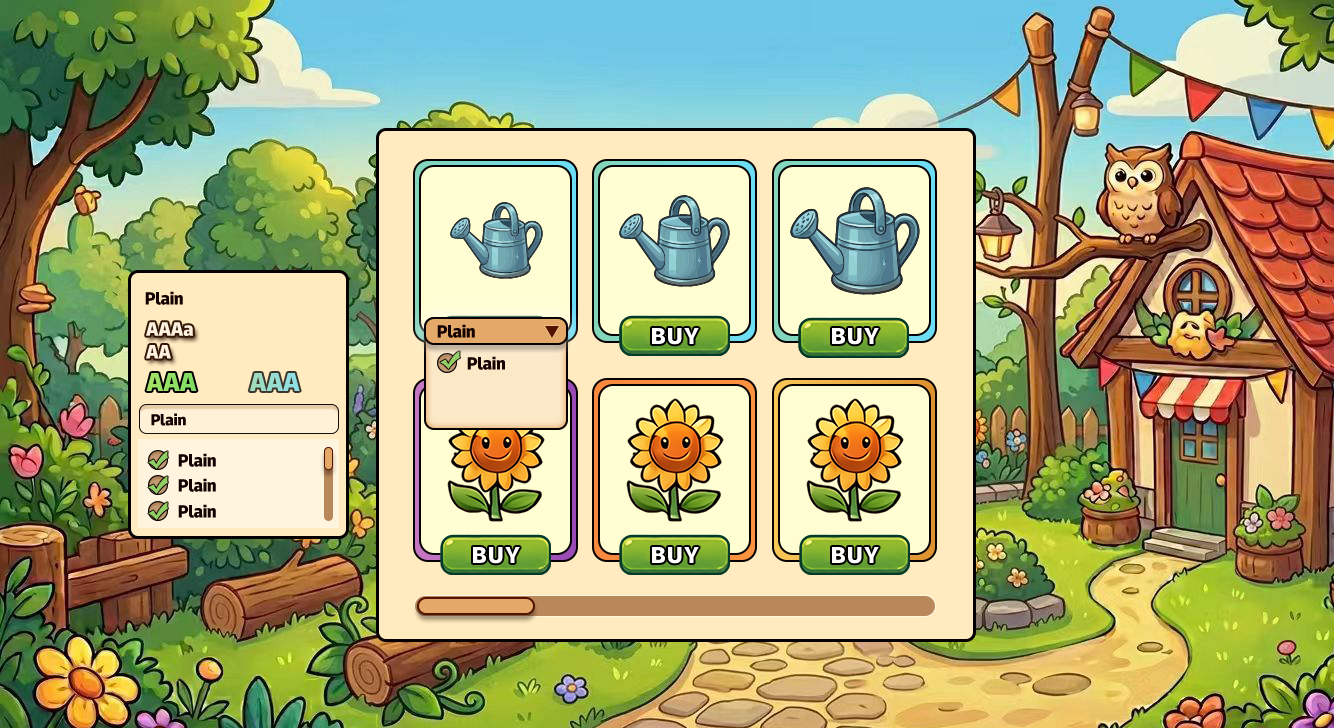
<style>
.page{position:relative;width:1334px;height:728px}
.page>*{position:absolute;margin:0}
.t1{font:15.2px "HYYaKuHeiW";color:#130000}
.t2{font:17.1px/22.8px "HYYaKuHeiW";color:#fff2e0}
.t3{font:20px "HYYaKuHeiW";letter-spacing:0.1em;color:#ffffff}
.t4{font:22.8px "HYYaKuHeiW";color:#93df66}
.t5{font:22.8px "HYYaKuHeiW";color:#97ddd1}
.t6{font:14px "HYYaKuHeiW";color:#130000}
</style>
<div class="page">
<p class="t1" style="left:145px;top:291px;width:38px;height:14px">Plain</p>
<p class="t2" style="left:146px;top:322px;width:48px;height:37px">AAAa<br>AA</p>
<p class="t1" style="left:437px;top:324px;width:38px;height:14px">Plain</p>
<p class="t3" style="left:652px;top:328px;width:47px;height:17px">BUY</p>
<p class="t3" style="left:832px;top:328px;width:47px;height:17px">BUY</p>
<p class="t1" style="left:467px;top:356px;width:38px;height:14px">Plain</p>
<p class="t4" style="left:146px;top:373px;width:51px;height:18px">AAA</p>
<p class="t5" style="left:249px;top:373px;width:51px;height:18px">AAA</p>
<p class="t6" style="left:151px;top:413px;width:35px;height:13px">Plain</p>
<p class="t1" style="left:178px;top:453px;width:38px;height:14px">Plain</p>
<p class="t1" style="left:178px;top:478px;width:38px;height:14px">Plain</p>
<p class="t1" style="left:178px;top:504px;width:38px;height:14px">Plain</p>
<p class="t3" style="left:473px;top:547px;width:47px;height:17px">BUY</p>
<p class="t3" style="left:652px;top:547px;width:47px;height:17px">BUY</p>
<p class="t3" style="left:832px;top:547px;width:47px;height:17px">BUY</p>
</div>
